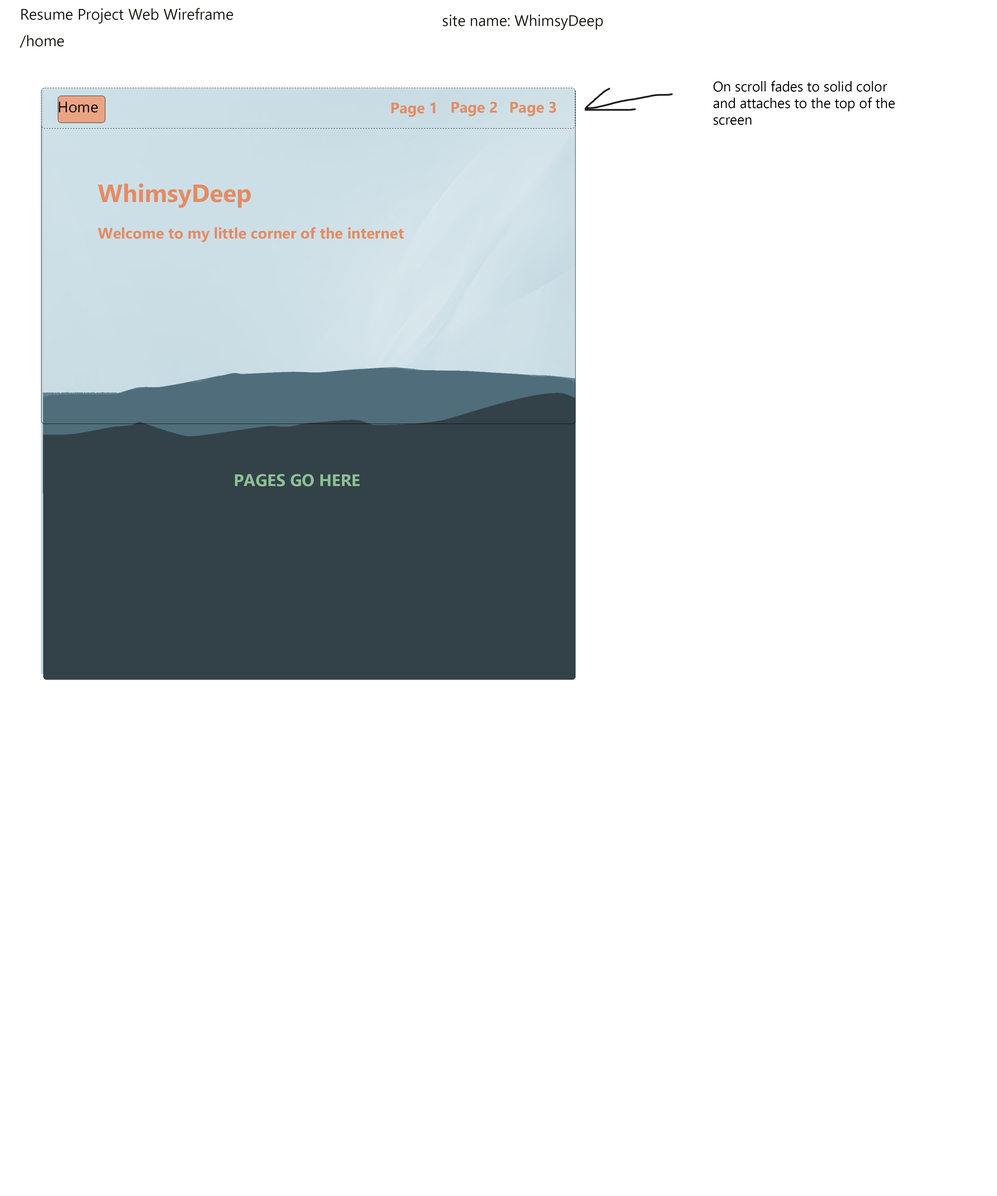
<style>
.page{position:relative;width:997px;height:1196px;background:#ffffff}
.page>*{position:absolute;margin:0}
.t1{font:15.2px "Ebrima";color:#1c1912}
.t2{font:13.8px "Ebrima";color:#000000}
.t3{font:15.2px "Ebrima";color:#000000}
.t4{font:15.2px "Ebrima-Bold";color:#e38c64}
.t5{font:24.9px "Ebrima-Bold";color:#e38c64}
.t6{font:16.6px "Ebrima-Bold";color:#8dc094}
</style>
<div class="page">
<p class="t1" style="left:21px;top:8px;width:212px;height:16px">Resume Project Web Wireframe</p>
<p class="t1" style="left:443px;top:15px;width:160px;height:15px">site name: WhimsyDeep</p>
<p class="t1" style="left:20px;top:35px;width:44px;height:13px">/home</p>
<p class="t2" style="left:713px;top:81px;width:182px;height:44px">On scroll fades to solid color<br>and attaches to the top of the <br>screen</p>
<p class="t3" style="left:59px;top:102px;width:39px;height:11px">Home</p>
<p class="t4" style="left:451px;top:102px;width:46px;height:14px">Page 2</p>
<p class="t4" style="left:510px;top:102px;width:46px;height:14px">Page 3</p>
<p class="t4" style="left:391px;top:102px;width:44px;height:15px">Page 1</p>
<p class="t4" style="left:98px;top:183px;width:306px;height:59px"><span class="t5">WhimsyDeep<br></span><br>Welcome to my little corner of the internet</p>
<p class="t6" style="left:235px;top:474px;width:125px;height:12px">PAGES GO HERE</p>
</div>
